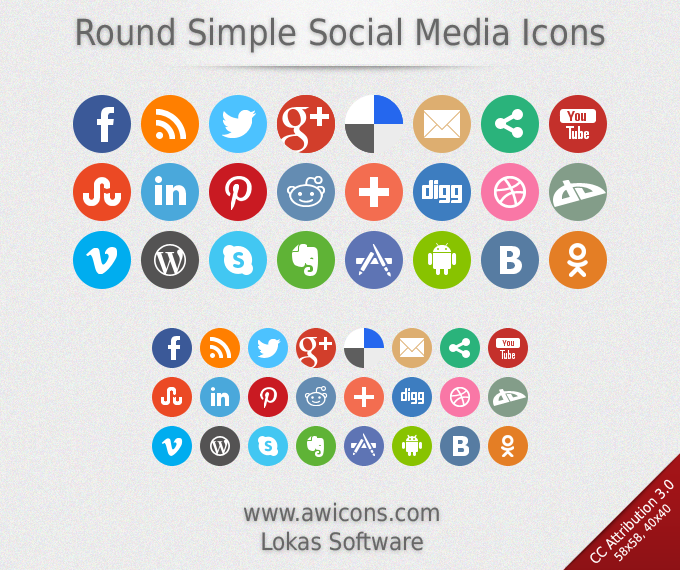
<style>
.page{position:relative;width:680px;height:570px}
.page>*{position:absolute;margin:0}
.t1{font:36px "DejaVuSansCondensed";color:#676767}
.t2{font:14px "DejaVuSansCondensed";color:#ffffff}
.t3{font:12px "DejaVuSansCondensed";color:#ffffff}
.t4{font:24px "DejaVuSansCondensed";color:#676767}
</style>
<div class="page">
<p class="t1" style="left:77px;top:17px;width:528px;height:36px">Round Simple Social Media Icons</p>
<p class="t2" style="left:590px;top:479px;width:84px;height:84px;text-align:center;rotate:-45deg">CC Attribution 3.0<br><span class="t3">58x58, 40x40</span></p>
<p class="t4" style="left:244px;top:502px;width:195px;height:49px;text-align:center">www.awicons.com<br>Lokas Software</p>
</div>
